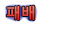
<style>
.page{position:relative;width:64px;height:32px;background:#ffffff}
.page>*{position:absolute;margin:0}
.t1{font:15px "MalgunGothicBold"}
</style>
<div class="page">
<p class="t1" style="left:6px;top:5px;width:29px;height:15px">패배</p>
</div>
